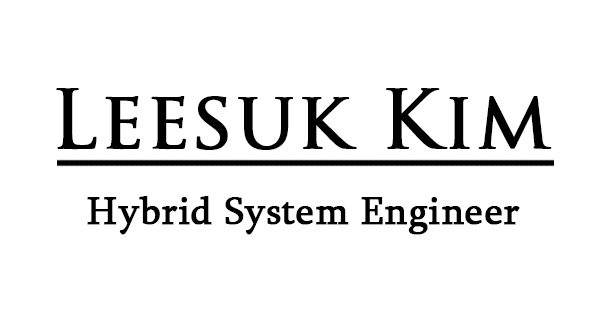
<style>
.page{position:relative;width:600px;height:315px;background:#ffffff}
.page>*{position:absolute;margin:0}
.t1{font:80px "TrajanPro-Regular";color:#000000;font-weight:bold}
.t2{font:40px "Sylfaen";color:#000000;font-weight:bold}
</style>
<div class="page">
<p class="t1" style="left:56px;top:88px;width:496px;height:62px">Leesuk Kim</p>
<p class="t2" style="left:87px;top:196px;width:433px;height:39px">Hybrid System Engineer</p>
</div>
